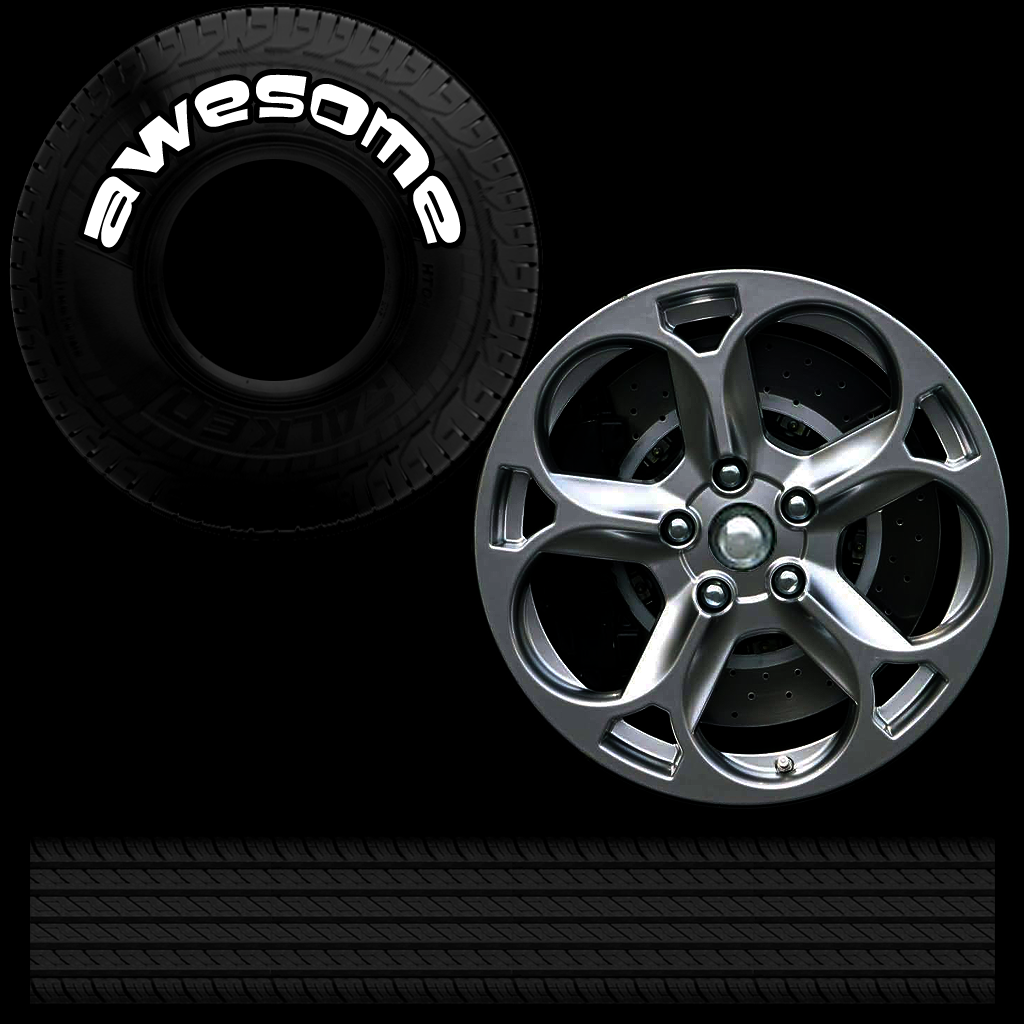
<style>
.page{position:relative;width:1024px;height:1024px;background:#000000}
.page>*{position:absolute;margin:0}
.t1{font:75.2px "Baveuse";color:#fefffe;font-variant:small-caps;scale:0.89 1}
</style>
<div class="page">
<p class="t1" style="left:84px;top:74px;width:377px;height:174px">awesome</p>
</div>
